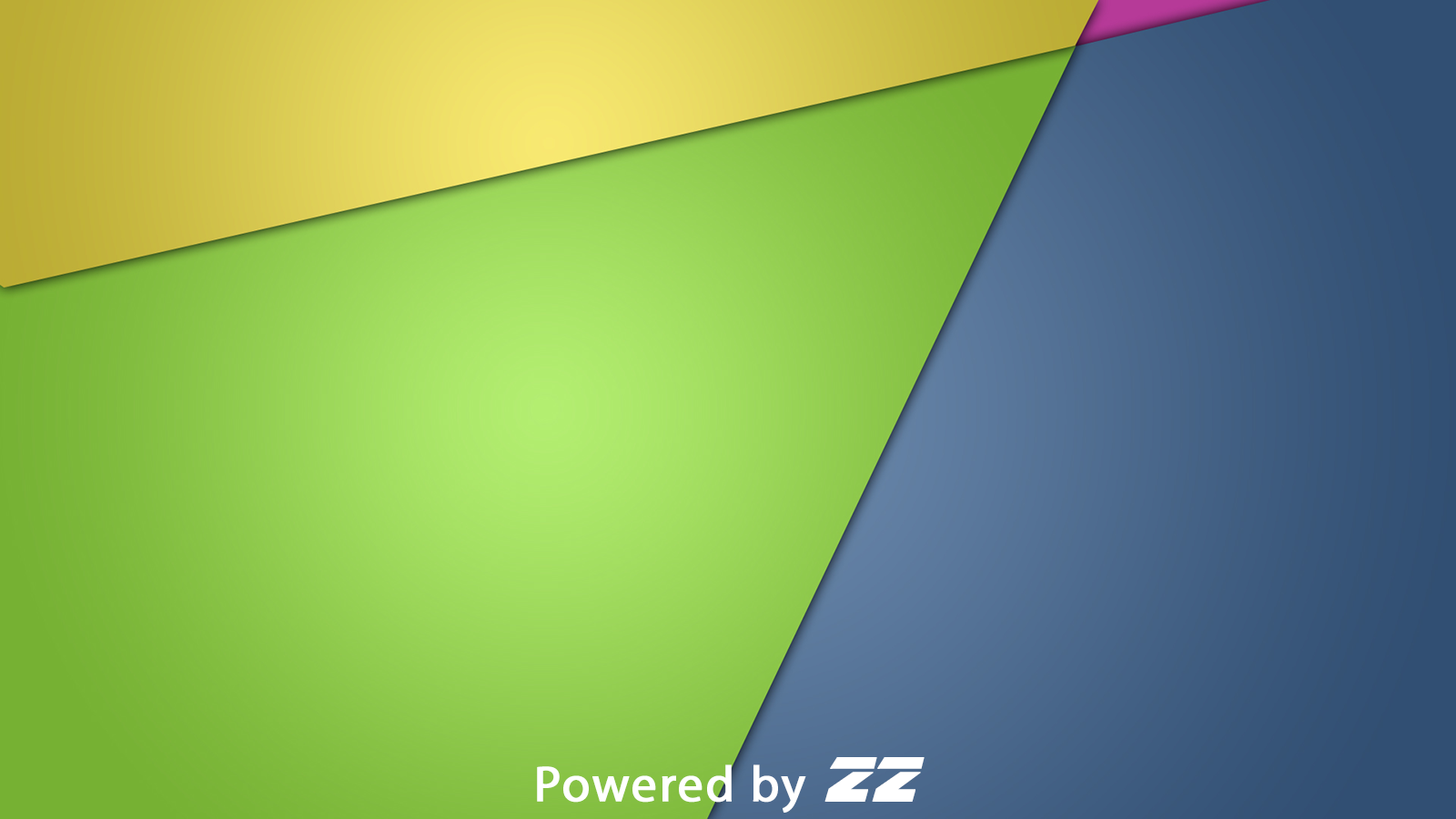
<style>
.page{position:relative;width:1456px;height:819px}
.page>*{position:absolute;margin:0}
.t1{font:50.6px "MyriadPro-Regular";letter-spacing:0.025em;color:#ffffff;font-weight:bold}
.t2{font:63.2px "BladeRunnerMovieFont";letter-spacing:0.025em;color:#ffffff;font-weight:bold}
</style>
<div class="page">
<p class="t1" style="left:537px;top:757px;width:388px;height:56px">Powered by <span class="t2">ZZ</span></p>
</div>
